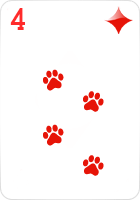
<style>
.page{position:relative;width:140px;height:200px;background:#ffffff}
.page>*{position:absolute;margin:0}
.t1{font:26px "CardCharacters";color:#ff2b2b}
</style>
<div class="page">
<p class="t1" style="left:10px;top:8px;width:15px;height:22px">4</p>
</div>
